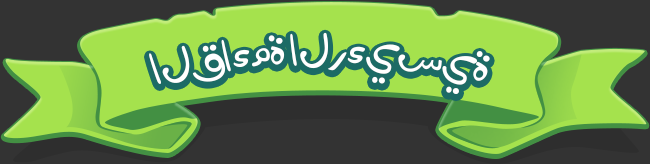
<style>
.page{position:relative;width:650px;height:164px;background:#a5e24d}
.page>*{position:absolute;margin:0}
.t1{font:58.2px "Aref_Menna-Light";letter-spacing:-0.02em;color:#ffffff}
</style>
<div class="page">
<p class="t1" style="left:149px;top:32px;width:341px;height:62px">القاءمة الرءيسية</p>
</div>
